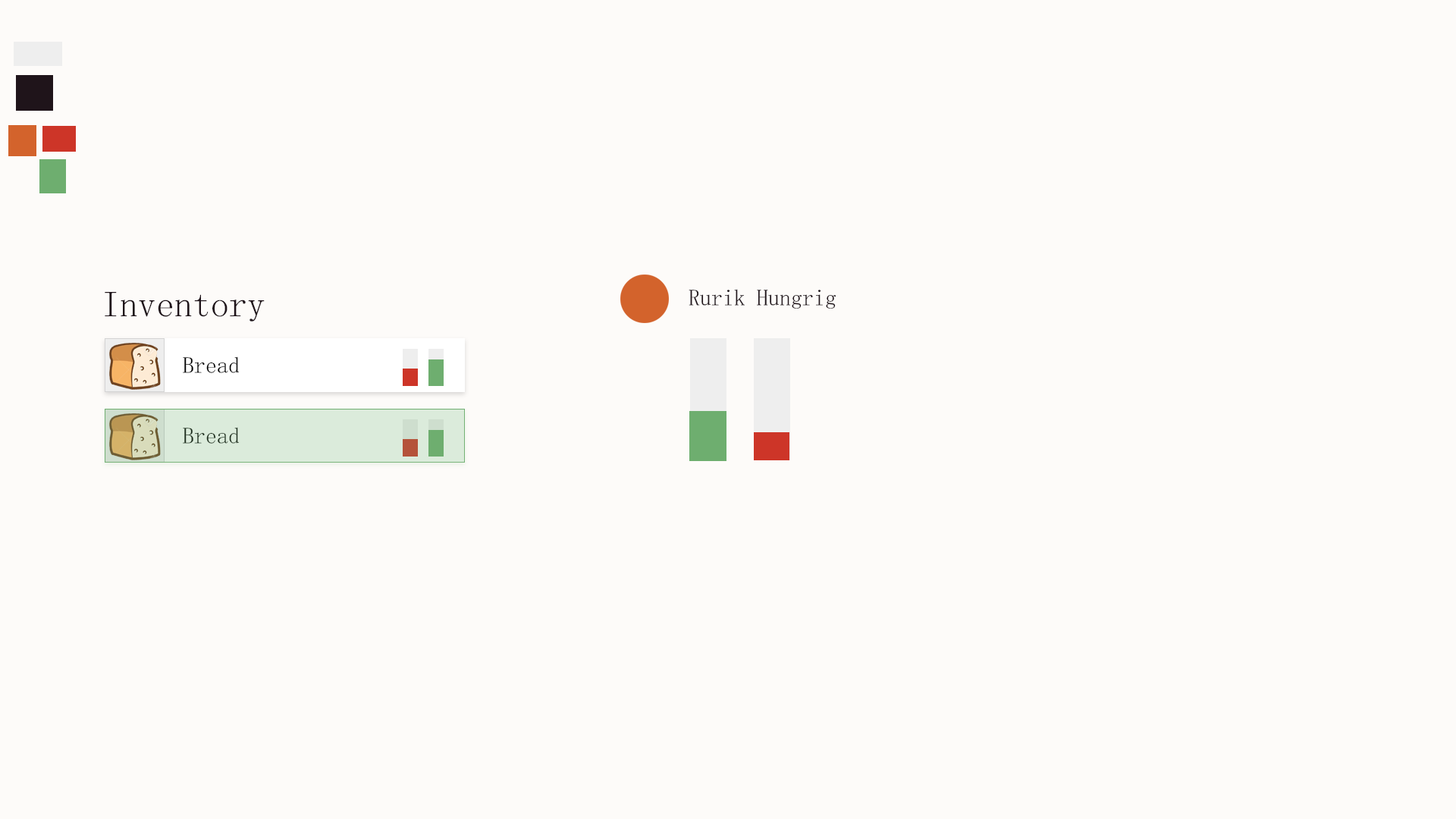
<style>
.page{position:relative;width:1456px;height:819px;background:#fdfbf9}
.page>*{position:absolute;margin:0}
.t1{font:36.4px "SimSun-ExtB";color:#1f141a}
.t2{font:22.7px "SimSun-ExtB";color:#1f141a}
.t3{font:22.7px "SimSun-ExtB";color:#000000}
.t4{font:22.7px "SimSun-ExtB";color:#1c2c1c}
</style>
<div class="page">
<p class="t1" style="left:105px;top:292px;width:160px;height:30px">Inventory</p>
<p class="t2" style="left:689px;top:289px;width:147px;height:20px">Rurik Hungrig</p>
<p class="t3" style="left:183px;top:356px;width:56px;height:17px">Bread</p>
<p class="t4" style="left:183px;top:427px;width:56px;height:17px">Bread</p>
</div>
